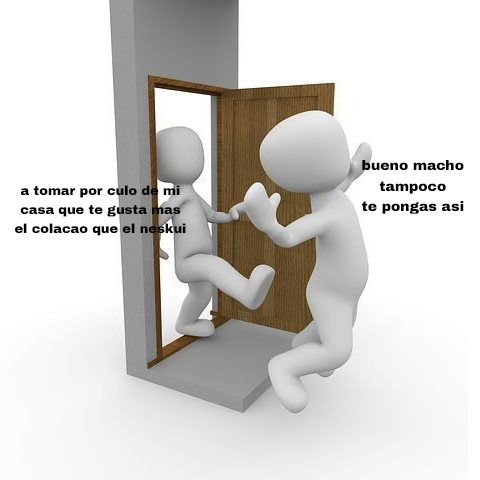
<style>
.page{position:relative;width:480px;height:480px;background:#ffffff}
.page>*{position:absolute;margin:0}
.t1{font:14px "ArchivoBlack-Regular";color:#000000}
.t2{font:12.9px "ArchivoBlack-Regular";color:#000000}
</style>
<div class="page">
<p class="t1" style="left:362px;top:160px;width:102px;height:54px;text-align:center">bueno macho<br>tampoco<br>te pongas asi</p>
<p class="t2" style="left:15px;top:185px;width:171px;height:51px;text-align:center">a tomar por culo de mi<br>casa que te gusta mas<br>el colacao que el neskui</p>
</div>
